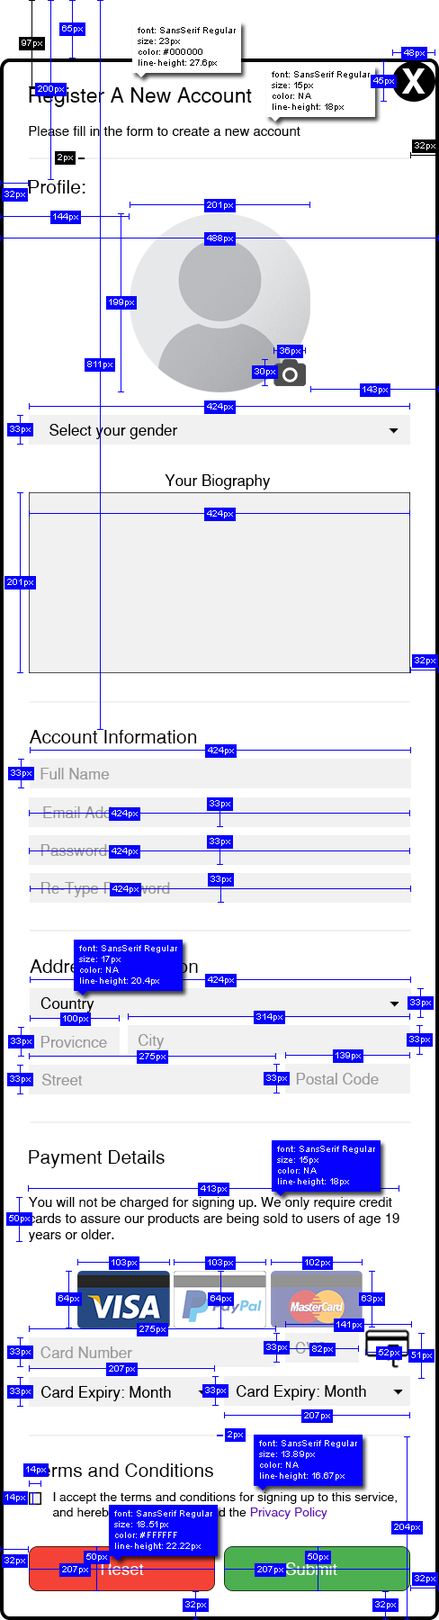
<style>
.page{position:relative;width:439px;height:1620px;background:#ffffff}
.page>*{position:absolute;margin:0}
.t1{font:9px "ArialMT";color:#ffffff}
.t2{font:9px "ArialMT";color:#000000}
.t3{font:34px "SansSerifBold";color:#ffffff;scale:1.07 1}
.t4{font:20.7px "SansSerif";color:#000000}
.t5{font:13.5px "SansSerif";color:#000000}
.t6{font:18.9px "SansSerif";color:#000000}
.t7{font:15.3px "SansSerif";color:#000000}
.t8{font:15.3px "SansSerif";color:#999999}
.t9{font:15.3px "SansSerif"}
.t10{font:18.9px "SansSerif"}
.t11{font:12.5px "SansSerif";color:#000000}
.t12{font:12.5px "SansSerif";color:#610fbc}
.t13{font:16.7px "SansSerif";color:#ffffff}
</style>
<div class="page">
<p class="t1" style="left:62px;top:25px;width:21px;height:8px">65px</p>
<p class="t2" style="left:138px;top:27px;width:98px;height:41px">font: SansSerif Regular<br>size: 23px<br>color: #000000<br>line-height: 27.6px</p>
<p class="t1" style="left:22px;top:40px;width:20px;height:8px">97px</p>
<p class="t1" style="left:404px;top:50px;width:21px;height:8px">48px</p>
<p class="t2" style="left:272px;top:71px;width:98px;height:41px">font: SansSerif Regular<br>size: 15px<br>color: NA<br>line-height: 18px</p>
<p class="t1" style="left:374px;top:77px;width:20px;height:9px">45px</p>
<p class="t3" style="left:402px;top:68px;width:24px;height:26px">X</p>
<p class="t4" style="left:29px;top:87px;width:223px;height:20px">Register A New Account</p>
<p class="t1" style="left:38px;top:86px;width:26px;height:8px">200px</p>
<p class="t5" style="left:29px;top:126px;width:272px;height:10px">Please fill in the form to create a new account</p>
<p class="t1" style="left:415px;top:142px;width:21px;height:8px">32px</p>
<p class="t1" style="left:58px;top:154px;width:15px;height:8px">2px</p>
<p class="t6" style="left:29px;top:180px;width:57px;height:14px">Profile:</p>
<p class="t1" style="left:4px;top:191px;width:21px;height:8px">32px</p>
<p class="t1" style="left:207px;top:202px;width:26px;height:8px">201px</p>
<p class="t1" style="left:53px;top:213px;width:25px;height:8px">144px</p>
<p class="t1" style="left:207px;top:235px;width:26px;height:8px">488px</p>
<p class="t1" style="left:109px;top:299px;width:25px;height:8px">199px</p>
<p class="t1" style="left:280px;top:347px;width:21px;height:9px">36px</p>
<p class="t1" style="left:87px;top:361px;width:25px;height:8px">811px</p>
<p class="t1" style="left:255px;top:368px;width:20px;height:8px">30px</p>
<p class="t1" style="left:363px;top:386px;width:25px;height:8px">143px</p>
<p class="t1" style="left:207px;top:403px;width:26px;height:8px">424px</p>
<p class="t1" style="left:10px;top:426px;width:21px;height:8px">33px</p>
<p class="t7" style="left:50px;top:424px;width:128px;height:15px">Select your gender</p>
<p class="t7" style="left:165px;top:474px;width:106px;height:16px">Your Biography</p>
<p class="t1" style="left:207px;top:510px;width:26px;height:8px">424px</p>
<p class="t1" style="left:7px;top:579px;width:26px;height:8px">201px</p>
<p class="t1" style="left:415px;top:657px;width:21px;height:8px">32px</p>
<p class="t6" style="left:29px;top:730px;width:168px;height:13px">Account Information</p>
<p class="t1" style="left:208px;top:747px;width:26px;height:8px">424px</p>
<p class="t1" style="left:11px;top:770px;width:21px;height:8px">33px</p>
<p class="t8" style="left:40px;top:768px;width:70px;height:11px">Full Name</p>
<p class="t9" style="left:43px;top:806px;width:98px;height:12px">Email Address</p>
<p class="t1" style="left:210px;top:800px;width:20px;height:8px">33px</p>
<p class="t1" style="left:112px;top:810px;width:26px;height:8px">424px</p>
<p class="t8" style="left:40px;top:844px;width:67px;height:12px">Password</p>
<p class="t1" style="left:210px;top:838px;width:20px;height:8px">33px</p>
<p class="t1" style="left:112px;top:848px;width:26px;height:8px">424px</p>
<p class="t1" style="left:211px;top:876px;width:20px;height:8px">33px</p>
<p class="t9" style="left:40px;top:882px;width:130px;height:15px">Re-Type Password</p>
<p class="t1" style="left:112px;top:886px;width:27px;height:8px">424px</p>
<p class="t1" style="left:79px;top:945px;width:98px;height:41px">font: SansSerif Regular<br>size: 17px<br>color: NA<br>line-height: 20.4px</p>
<p class="t10" style="left:30px;top:959px;width:168px;height:14px">Address Information</p>
<p class="t1" style="left:208px;top:976px;width:26px;height:9px">424px</p>
<p class="t7" style="left:40px;top:997px;width:54px;height:15px">Country</p>
<p class="t1" style="left:410px;top:999px;width:21px;height:8px">33px</p>
<p class="t1" style="left:256px;top:1013px;width:27px;height:9px">314px</p>
<p class="t1" style="left:63px;top:1015px;width:25px;height:8px">100px</p>
<p class="t1" style="left:11px;top:1038px;width:21px;height:8px">33px</p>
<p class="t8" style="left:40px;top:1036px;width:67px;height:12px">Provicnce</p>
<p class="t8" style="left:139px;top:1034px;width:26px;height:15px">City</p>
<p class="t1" style="left:410px;top:1036px;width:20px;height:8px">33px</p>
<p class="t1" style="left:140px;top:1053px;width:26px;height:8px">275px</p>
<p class="t1" style="left:336px;top:1052px;width:25px;height:8px">139px</p>
<p class="t8" style="left:41px;top:1074px;width:42px;height:11px">Street</p>
<p class="t8" style="left:296px;top:1073px;width:83px;height:11px">Postal Code</p>
<p class="t1" style="left:10px;top:1076px;width:21px;height:8px">33px</p>
<p class="t1" style="left:266px;top:1075px;width:21px;height:8px">33px</p>
<p class="t1" style="left:277px;top:1146px;width:98px;height:40px">font: SansSerif Regular<br>size: 15px<br>color: NA<br>line-height: 18px</p>
<p class="t6" style="left:29px;top:1150px;width:136px;height:18px">Payment Details</p>
<p class="t1" style="left:201px;top:1185px;width:26px;height:8px">413px</p>
<p class="t5" style="left:28px;top:1197px;width:372px;height:45px">You will not be charged for signing up. We only require credit <br>cards to assure our products are being sold to users of age 19 <br>years or older.</p>
<p class="t1" style="left:9px;top:1215px;width:21px;height:8px">50px</p>
<p class="t1" style="left:112px;top:1259px;width:25px;height:8px">103px</p>
<p class="t1" style="left:208px;top:1259px;width:25px;height:8px">103px</p>
<p class="t1" style="left:305px;top:1259px;width:25px;height:8px">102px</p>
<p class="t1" style="left:58px;top:1295px;width:21px;height:8px">64px</p>
<p class="t1" style="left:211px;top:1295px;width:20px;height:8px">64px</p>
<p class="t1" style="left:362px;top:1295px;width:20px;height:8px">63px</p>
<p class="t1" style="left:140px;top:1326px;width:26px;height:8px">275px</p>
<p class="t1" style="left:337px;top:1321px;width:25px;height:8px">141px</p>
<p class="t1" style="left:10px;top:1348px;width:21px;height:8px">33px</p>
<p class="t8" style="left:40px;top:1346px;width:92px;height:12px">Card Number</p>
<p class="t1" style="left:266px;top:1344px;width:21px;height:8px">33px</p>
<p class="t9" style="left:295px;top:1342px;width:33px;height:12px">CVC</p>
<p class="t1" style="left:312px;top:1346px;width:21px;height:8px">82px</p>
<p class="t1" style="left:379px;top:1349px;width:21px;height:8px">52px</p>
<p class="t1" style="left:411px;top:1352px;width:21px;height:8px">51px</p>
<p class="t1" style="left:109px;top:1365px;width:26px;height:8px">207px</p>
<p class="t7" style="left:237px;top:1385px;width:129px;height:15px">Card Expiry: Month</p>
<p class="t1" style="left:10px;top:1388px;width:21px;height:8px">33px</p>
<p class="t7" style="left:41px;top:1386px;width:130px;height:15px">Card Expiry: Month</p>
<p class="t1" style="left:205px;top:1387px;width:21px;height:8px">33px</p>
<p class="t1" style="left:304px;top:1412px;width:26px;height:8px">207px</p>
<p class="t1" style="left:228px;top:1431px;width:15px;height:8px">2px</p>
<p class="t1" style="left:259px;top:1440px;width:98px;height:40px">font: SansSerif Regular<br>size: 13.89px<br>color: NA<br>line-height: 16.67px</p>
<p class="t1" style="left:26px;top:1466px;width:20px;height:8px">14px</p>
<p class="t6" style="left:29px;top:1463px;width:184px;height:14px">Terms and Conditions</p>
<p class="t1" style="left:5px;top:1494px;width:20px;height:8px">14px</p>
<p class="t11" style="left:53px;top:1492px;width:344px;height:27px">I accept the terms and conditions for signing up to this service, <br>and hereby confirm I have read the <span class="t12">Privacy Policy</span></p>
<p class="t1" style="left:114px;top:1510px;width:98px;height:41px">font: SansSerif Regular<br>size: 18.51px<br>color: #FFFFFF<br>line-height: 22.22px</p>
<p class="t1" style="left:394px;top:1524px;width:26px;height:8px">204px</p>
<p class="t1" style="left:86px;top:1553px;width:21px;height:9px">50px</p>
<p class="t1" style="left:308px;top:1553px;width:20px;height:9px">50px</p>
<p class="t1" style="left:4px;top:1557px;width:21px;height:8px">32px</p>
<p class="t1" style="left:62px;top:1566px;width:26px;height:8px">207px</p>
<p class="t13" style="left:101px;top:1562px;width:43px;height:13px">Reset</p>
<p class="t1" style="left:257px;top:1566px;width:27px;height:8px">207px</p>
<p class="t13" style="left:286px;top:1562px;width:52px;height:13px">Submit</p>
<p class="t1" style="left:415px;top:1575px;width:21px;height:8px">32px</p>
<p class="t1" style="left:185px;top:1601px;width:21px;height:8px">32px</p>
<p class="t1" style="left:375px;top:1601px;width:21px;height:8px">32px</p>
</div>
